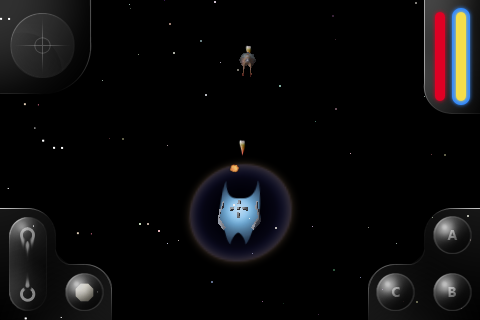
<style>
.page{position:relative;width:480px;height:320px;background:#000000}
.page>*{position:absolute;margin:0}
.t1{font:14px "SegoeUI-Bold"}
</style>
<div class="page">
<p class="t1" style="left:447px;top:230px;width:11px;height:10px">A</p>
<p class="t1" style="left:391px;top:287px;width:9px;height:10px">C</p>
<p class="t1" style="left:448px;top:287px;width:8px;height:10px">B</p>
</div>
